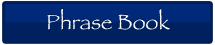
<style>
.page{position:relative;width:215px;height:45px;background:#002160}
.page>*{position:absolute;margin:0}
.t1{font:21.3px "Papyrus";color:#ffffff}
</style>
<div class="page">
<p class="t1" style="left:47px;top:9px;width:123px;height:21px">Phrase Book</p>
</div>
